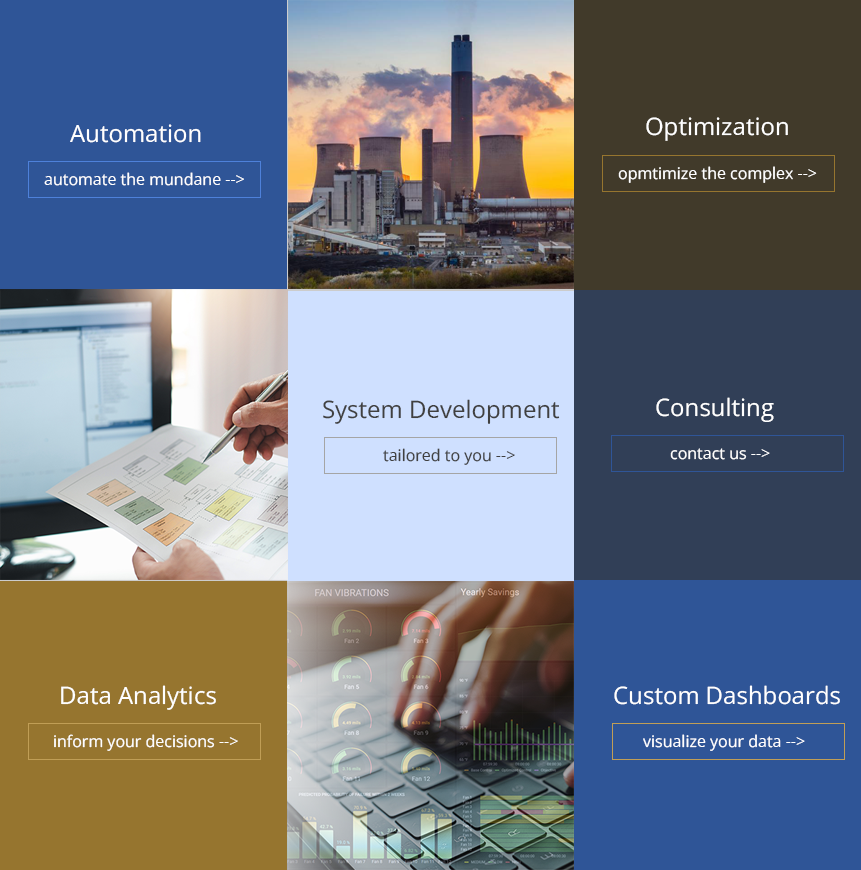
<style>
.page{position:relative;width:861px;height:870px;background:#2f5597}
.page>*{position:absolute;margin:0}
.t1{font:24px "OpenSans-Regular";color:#ffffff}
.t2{font:16px "OpenSans-Regular";color:#ffffff}
.t3{font:24px "OpenSans-Regular";color:#404040}
.t4{font:16px "OpenSans-Regular";color:#404040}
</style>
<div class="page">
<p class="t1" style="left:70px;top:124px;width:131px;height:19px">Automation</p>
<p class="t1" style="left:646px;top:117px;width:142px;height:24px">Optimization</p>
<p class="t2" style="left:44px;top:172px;width:200px;height:14px">automate the mundane --&gt;</p>
<p class="t2" style="left:618px;top:166px;width:199px;height:17px">opmtimize the complex --&gt;</p>
<p class="t3" style="left:323px;top:399px;width:237px;height:25px">System Development</p>
<p class="t1" style="left:656px;top:397px;width:118px;height:25px">Consulting</p>
<p class="t4" style="left:383px;top:448px;width:132px;height:17px">tailored to you --&gt;</p>
<p class="t2" style="left:670px;top:448px;width:100px;height:12px">contact us --&gt;</p>
<p class="t1" style="left:61px;top:685px;width:155px;height:25px">Data Analytics</p>
<p class="t1" style="left:614px;top:685px;width:226px;height:20px">Custom Dashboards</p>
<p class="t2" style="left:54px;top:734px;width:184px;height:17px">inform your decisions --&gt;</p>
<p class="t2" style="left:643px;top:734px;width:162px;height:17px">visualize your data --&gt;</p>
</div>
